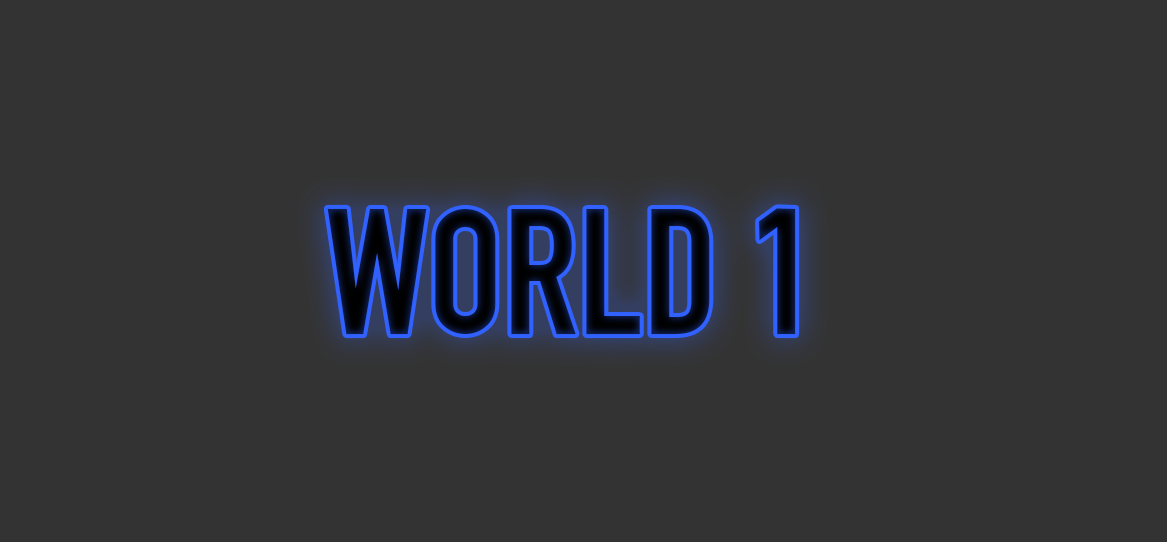
<style>
.page{position:relative;width:1167px;height:542px;background:#333333}
.page>*{position:absolute;margin:0}
.t1{font:175.4px "DINEngschrift";color:#040815}
</style>
<div class="page">
<p class="t1" style="left:327px;top:208px;width:469px;height:127px">WORLD 1</p>
</div>
